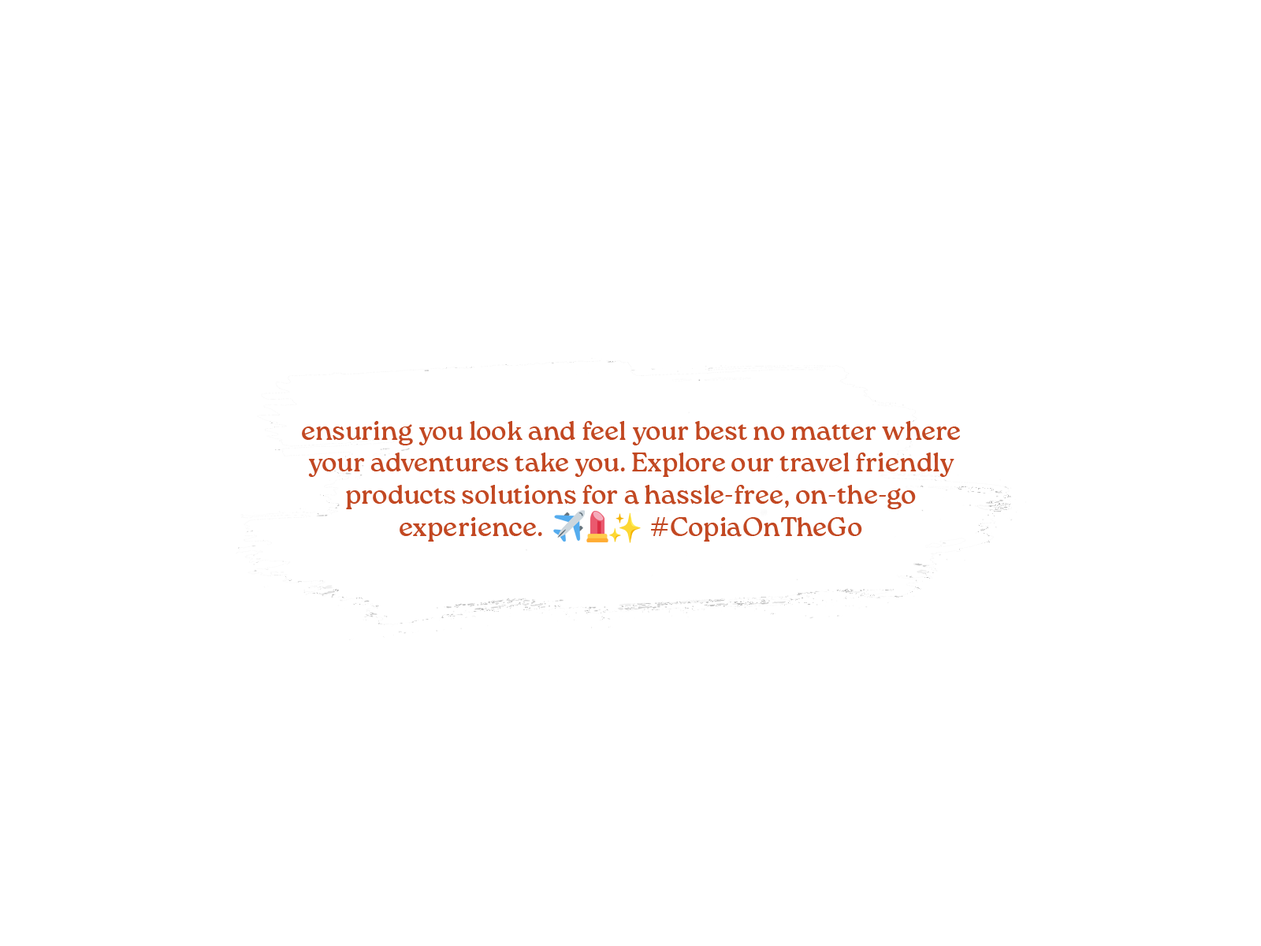
<style>
.page{position:relative;width:1261px;height:946px;background:#ffffff}
.page>*{position:absolute;margin:0}
.t1{font:26.8px "RocaOne-Rg";color:#c24822}
</style>
<div class="page">
<p class="t1" style="left:302px;top:421px;width:658px;height:120px;text-align:center">ensuring you look and feel your best no matter where<br>your adventures take you. Explore our travel friendly<br>products solutions for a hassle-free, on-the-go<br>experience.                    #CopiaOnTheGo</p>
</div>
